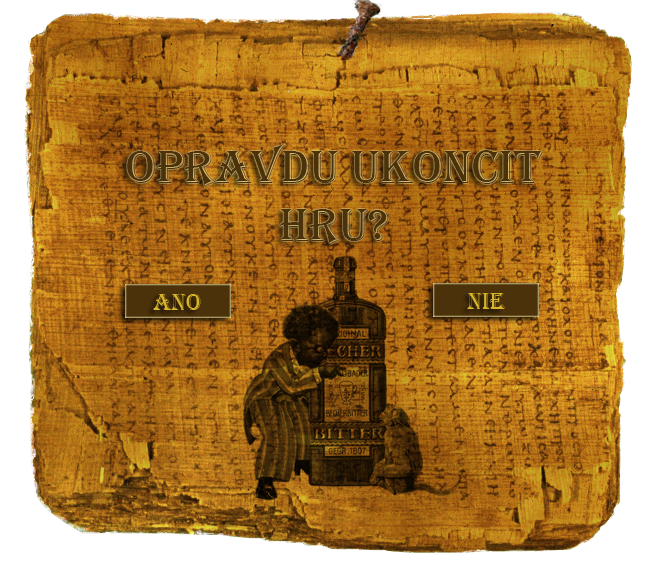
<style>
.page{position:relative;width:650px;height:568px}
.page>*{position:absolute;margin:0}
.t1{font:48px "Algerian";color:#4c320a}
.t2{font:24px "Algerian";color:#d6b42b}
</style>
<div class="page">
<p class="t1" style="left:127px;top:143px;width:416px;height:102px;text-align:center">opravdu ukoncit<br>hru?</p>
<p class="t2" style="left:153px;top:294px;width:48px;height:16px">Ano</p>
<p class="t2" style="left:467px;top:293px;width:38px;height:16px">nie</p>
</div>
